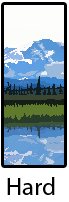
<style>
.page{position:relative;width:69px;height:202px}
.page>*{position:absolute;margin:0}
.t1{font:25.1px "MyriadPro-Regular";color:#000000}
</style>
<div class="page">
<p class="t1" style="left:7px;top:177px;width:48px;height:18px">Hard</p>
</div>
